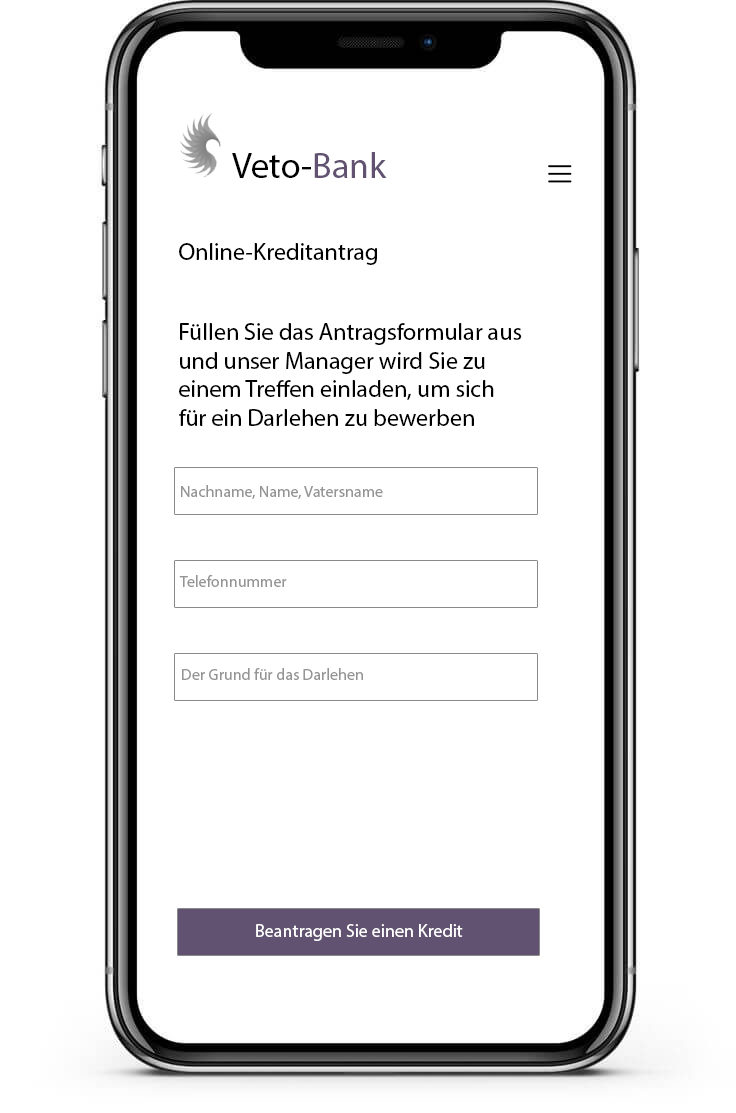
<style>
.page{position:relative;width:736px;height:1113px;background:#ffffff}
.page>*{position:absolute;margin:0}
.t1{font:36px "MyriadPro-Regular";color:#000000}
.t2{font:36px "MyriadPro-Regular";color:#605270}
.t3{font:24px "MyriadPro-Regular";color:#000000}
.t4{font:16px "MyriadPro-Regular";color:#949494}
.t5{font:18px "MyriadPro-Regular";color:#ffffff}
</style>
<div class="page">
<p class="t1" style="left:232px;top:152px;width:155px;height:26px">Veto-<span class="t2">Bank</span></p>
<p class="t3" style="left:179px;top:243px;width:198px;height:22px">Online-Kreditantrag</p>
<p class="t3" style="left:179px;top:323px;width:343px;height:103px">Füllen Sie das Antragsformular aus <br>und unser Manager wird Sie zu <br>einem Treffen einladen, um sich <br>für ein Darlehen zu bewerben</p>
<p class="t4" style="left:181px;top:485px;width:202px;height:14px">Nachname, Name, Vatersname</p>
<p class="t4" style="left:179px;top:575px;width:108px;height:12px">Telefonnummer</p>
<p class="t4" style="left:182px;top:668px;width:181px;height:12px">Der Grund für das Darlehen</p>
<p class="t5" style="left:256px;top:924px;width:207px;height:17px">Beantragen Sie einen Kredit</p>
</div>
